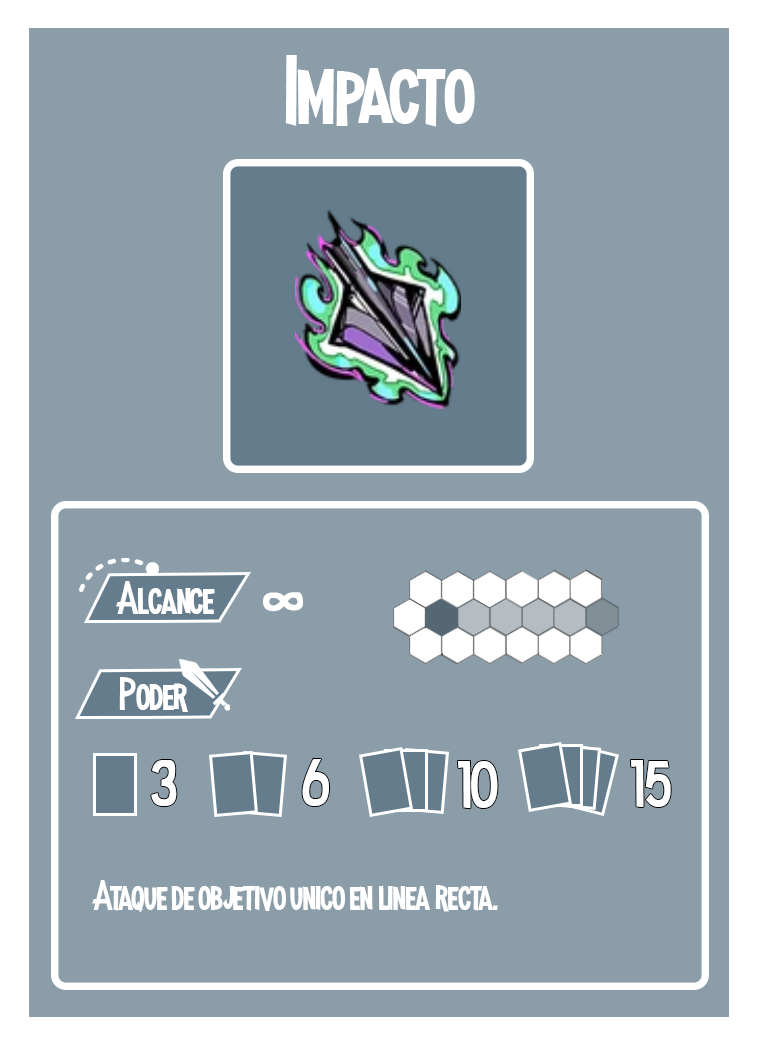
<style>
.page{position:relative;width:758px;height:1047px;background:#8b9da9}
.page>*{position:absolute;margin:0}
.t1{font:100px "MadnessHyperactive";color:#ffffff}
.t2{font:45.8px "MadnessHyperactive";color:#ffffff}
.t3{font:56.9px "MadnessHyperactive";color:#ffffff}
.t4{font:66.3px "MadnessHyperactive";color:#ffffff}
.t5{font:41.7px "MadnessHyperactive";color:#ffffff}
</style>
<div class="page">
<p class="t1" style="left:285px;top:55px;width:190px;height:72px">Impacto</p>
<p class="t2" style="left:116px;top:581px;width:99px;height:33px">Alcance</p>
<p class="t3" style="left:263px;top:592px;width:40px;height:20px;rotate:90deg">8</p>
<p class="t2" style="left:119px;top:677px;width:69px;height:35px">Poder</p>
<p class="t4" style="left:151px;top:760px;width:26px;height:46px">3</p>
<p class="t4" style="left:302px;top:759px;width:27px;height:47px">6</p>
<p class="t4" style="left:457px;top:761px;width:41px;height:48px">10</p>
<p class="t4" style="left:630px;top:760px;width:41px;height:48px">15</p>
<p class="t5" style="left:92px;top:880px;width:406px;height:33px">Ataque de objetivo unico en linea recta.</p>
</div>
